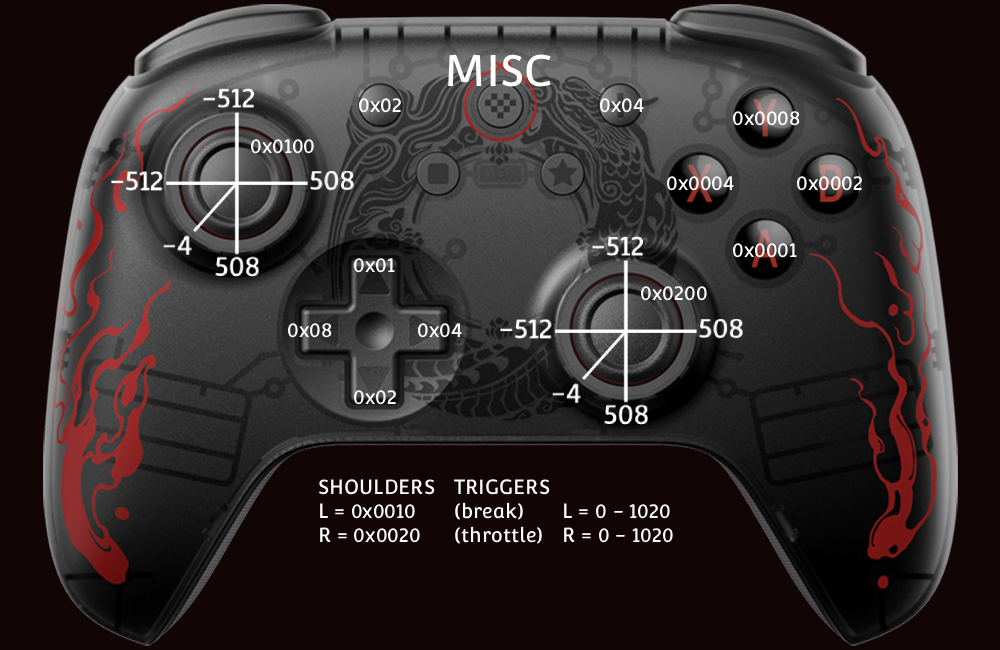
<style>
.page{position:relative;width:1000px;height:650px;background:#120505}
.page>*{position:absolute;margin:0}
.t1{font:43px "Convergence-Regular";color:#ffffff}
.t2{font:20px "Convergence-Regular";color:#ffffff}
</style>
<div class="page">
<p class="t1" style="left:448px;top:54px;width:103px;height:33px">MISC</p>
<p class="t2" style="left:359px;top:98px;width:42px;height:15px">0x02</p>
<p class="t2" style="left:600px;top:98px;width:44px;height:15px">0x04</p>
<p class="t2" style="left:733px;top:111px;width:67px;height:15px">0x0008</p>
<p class="t2" style="left:251px;top:139px;width:63px;height:15px">0x0100</p>
<p class="t2" style="left:667px;top:176px;width:67px;height:15px">0x0004</p>
<p class="t2" style="left:797px;top:176px;width:65px;height:15px">0x0002</p>
<p class="t2" style="left:733px;top:243px;width:64px;height:15px">0x0001</p>
<p class="t2" style="left:354px;top:258px;width:41px;height:15px">0x01</p>
<p class="t2" style="left:641px;top:286px;width:66px;height:15px">0x0200</p>
<p class="t2" style="left:288px;top:323px;width:44px;height:15px">0x08</p>
<p class="t2" style="left:418px;top:323px;width:44px;height:15px">0x04</p>
<p class="t2" style="left:354px;top:390px;width:42px;height:15px">0x02</p>
<p class="t2" style="left:319px;top:479px;width:116px;height:64px">SHOULDERS<br>L = 0x0010<br>R = 0x0020</p>
<p class="t2" style="left:454px;top:479px;width:219px;height:65px">TRIGGERS<br>(break)  L = 0 - 1020<br>(throttle)  R = 0 - 1020</p>
</div>
